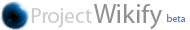
<style>
.page{position:relative;width:190px;height:30px;background:#ffffff}
.page>*{position:absolute;margin:0}
.t1{font:27px "MyriadPro-Regular";color:#919090}
.t2{font:21px "MyriadPro-Regular";color:#cacaca}
.t3{font:10px "MyriadPro-Regular";color:#6384c6}
</style>
<div class="page">
<p class="t1" style="left:94px;top:4px;width:68px;height:25px">Wikify</p>
<p class="t2" style="left:31px;top:8px;width:61px;height:20px">Project</p>
<p class="t3" style="left:167px;top:14px;width:18px;height:8px">beta</p>
</div>
